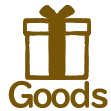
<style>
.page{position:relative;width:111px;height:111px;background:#ffffff}
.page>*{position:absolute;margin:0}
.t1{font:35.6px "UDDigiKyokashoNK-B";color:#765506}
</style>
<div class="page">
<p class="t1" style="left:8px;top:80px;width:100px;height:28px">Goods</p>
</div>
